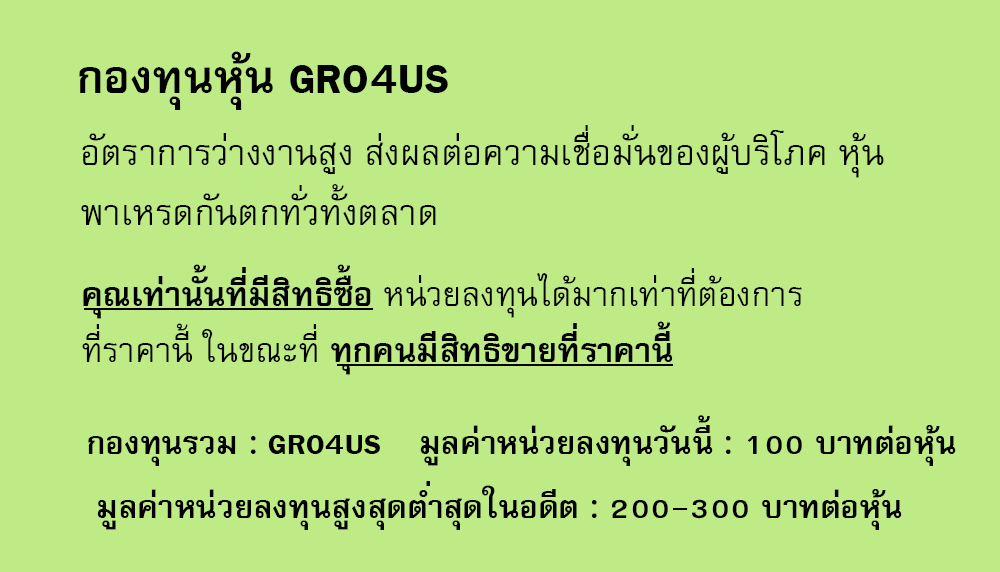
<style>
.page{position:relative;width:1000px;height:572px;background:#beeb85}
.page>*{position:absolute;margin:0}
.t1{font:64px "FreesiaUPCBold";color:#000000}
.t2{font:50px/60px "FreesiaUPC";color:#000000}
.t3{font:47px "FreesiaUPC";color:#000000}
.t4{font:47px "FreesiaUPCBold";color:#000000}
.t5{font:45px "FreesiaUPCBold";color:#000000}
</style>
<div class="page">
<p class="t1" style="left:79px;top:51px;width:369px;height:59px">กองทุนหุ้น GRO4US</p>
<p class="t2" style="left:81px;top:125px;width:803px;height:100px">อัตราการว่างงานสูง ส่งผลต่อความเชื่อมั่นของผู้บริโภค หุ้น<br>พาเหรดกันตกทั่วทั้งตลาด</p>
<p class="t3" style="left:82px;top:264px;width:720px;height:111px"><span class="t4">คุณเท่านั้นที่มีสิทธิซื้อ </span>หน่วยลงทุนได้มากเท่าที่ต้องการ<br>ที่ราคานี้ ในขณะที่<span class="t4"> ทุกคนมีสิทธิขายที่ราคานี้</span></p>
<p class="t5" style="left:420px;top:415px;width:536px;height:51px">มูลค่าหน่วยลงทุนวันนี้ : 100 บาทต่อหุ้น</p>
<p class="t5" style="left:88px;top:435px;width:292px;height:31px">กองทุนรวม : GRO4US</p>
<p class="t5" style="left:97px;top:481px;width:805px;height:49px">มูลค่าหน่วยลงทุนสูงสุดต่ำสุดในอดีต : 200-300 บาทต่อหุ้น</p>
</div>
